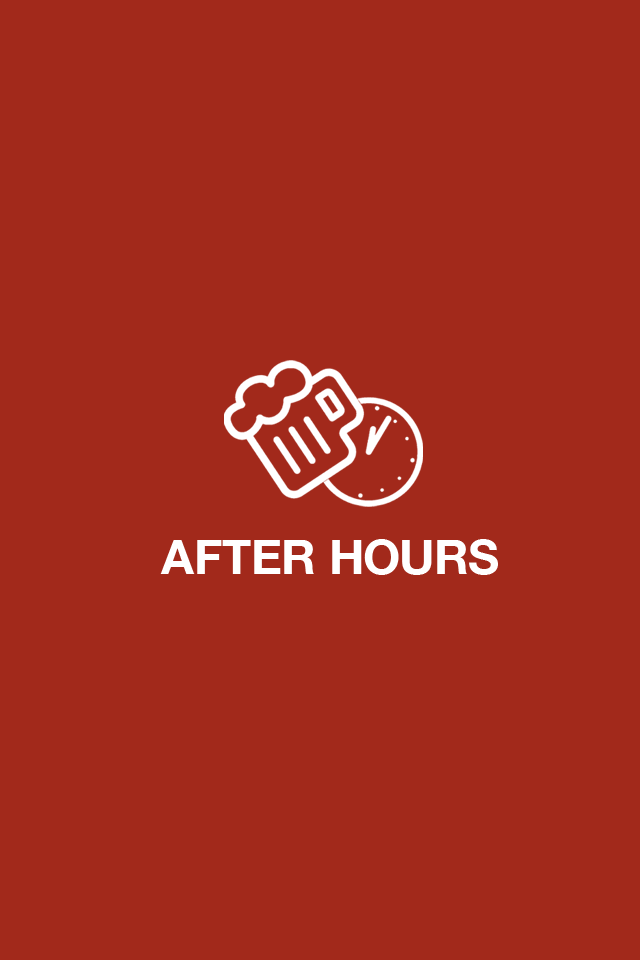
<style>
.page{position:relative;width:640px;height:960px;background:#a2291b}
.page>*{position:absolute;margin:0}
.t1{font:47.6px "HelveticaNeue-Bold";color:#ffffff;text-transform:uppercase}
</style>
<div class="page">
<p class="t1" style="left:160px;top:539px;width:338px;height:36px">After Hours</p>
</div>
